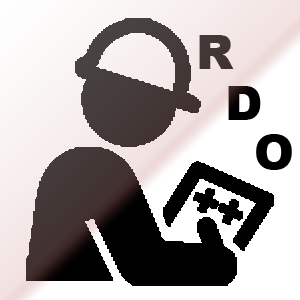
<style>
.page{position:relative;width:300px;height:300px;background:#ffffff}
.page>*{position:absolute;margin:0}
.t1{font:48px "Arial-Black";color:#433636}
.t2{font:48px "Arial-Black";color:#000000}
</style>
<div class="page">
<p class="t1" style="left:199px;top:35px;width:35px;height:34px">R</p>
<p class="t2" style="left:228px;top:86px;width:33px;height:34px">D</p>
<p class="t2" style="left:256px;top:134px;width:36px;height:36px">O</p>
</div>
